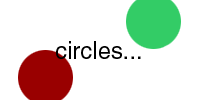
<style>
.page{position:relative;width:200px;height:100px;background:#ffffff}
.page>*{position:absolute;margin:0}
.t1{font:24px "Helvetica";color:#000000}
</style>
<div class="page">
<p class="t1" style="left:56px;top:41px;width:85px;height:18px">circles...</p>
</div>
